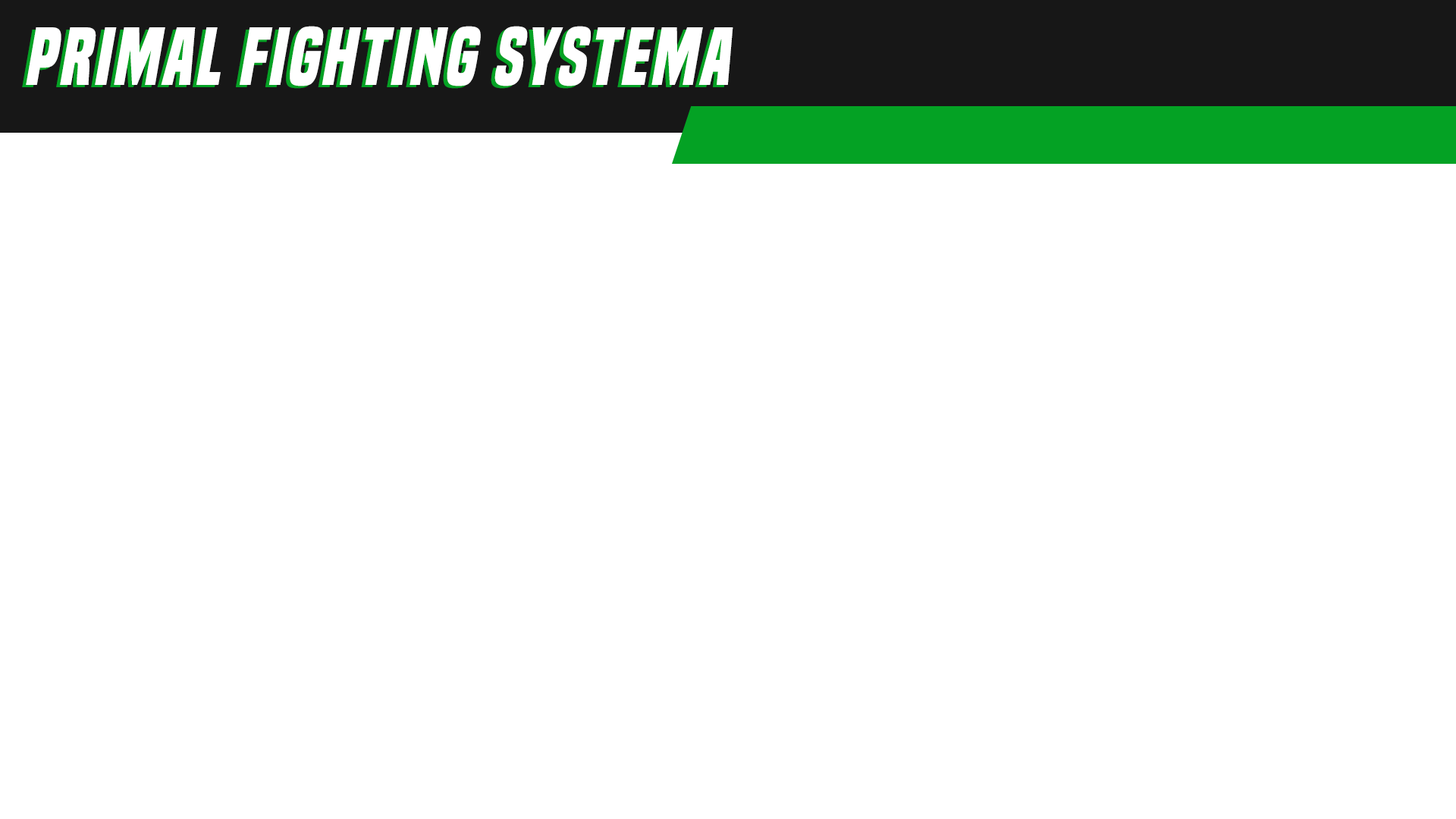
<style>
.page{position:relative;width:1456px;height:819px;background:#ffffff}
.page>*{position:absolute;margin:0}
.t1{font:75.8px "BuiltTitlingRg-BoldItalic";color:#ffffff}
</style>
<div class="page">
<p class="t1" style="left:22px;top:28px;width:708px;height:61px">primal fighting systema</p>
<p class="t1" style="left:26px;top:26px;width:707px;height:60px">primal fighting systema</p>
</div>
